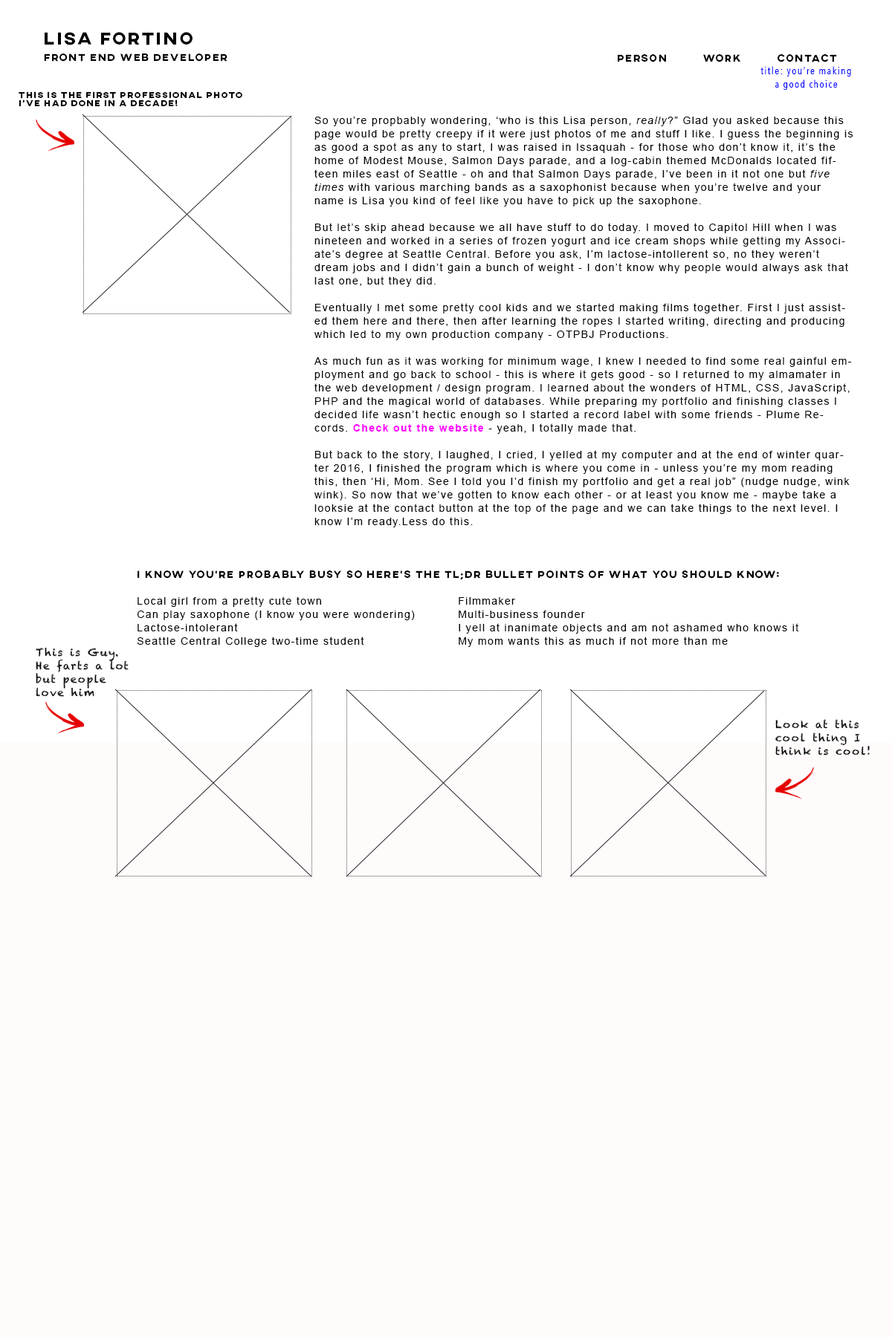
<style>
.page{position:relative;width:892px;height:1337px;background:#ffffff}
.page>*{position:absolute;margin:0}
.t1{font:10.4px/8.2px "AXIS-ExtraBold";letter-spacing:0.1em;color:#020202}
.t2{font:17.8px/8.2px "AXIS-ExtraBold";letter-spacing:0.1em;color:#020202}
.t3{font:10.4px "AXIS-ExtraBold";letter-spacing:0.1em;color:#020202}
.t4{font:10.4px/13.4px "AvenirNextCondensed-Regular";letter-spacing:0.1em;color:#0000ff}
.t5{font:8.9px/8.2px "AXIS-ExtraBold";letter-spacing:0.1em;color:#020202}
.t6{font:10.4px/13.4px "ArialMT";letter-spacing:0.1em;color:#020202}
.t7{font:10.4px/13.4px "Arial-ItalicMT";letter-spacing:0.1em;color:#020202}
.t8{font:10.4px/13.4px "Arial-BoldMT";letter-spacing:0.1em;color:#ff00ff}
.t9{font:10.4px/13.4px "AXIS-ExtraBold";letter-spacing:0.1em;color:#020202}
.t10{font:10.4px/13.4px "Chalkduster";letter-spacing:0.1em;color:#020202}
</style>
<div class="page">
<p class="t1" style="left:44px;top:32px;width:183px;height:30px"><span class="t2">LISA Fortino<br><br></span>front end web developer</p>
<p class="t3" style="left:617px;top:54px;width:220px;height:8px">person          work          contact</p>
<p class="t4" style="left:760px;top:66px;width:91px;height:24px;text-align:center">title: you’re making a good choice</p>
<p class="t5" style="left:19px;top:91px;width:223px;height:16px">this is the first professional photo i’ve had done in a decade!</p>
<p class="t6" style="left:314px;top:116px;width:539px;height:412px">So you’re propbably wondering, ‘who is this Lisa person, <span class="t7">really</span>?” Glad you asked because this page would be pretty creepy if it were just photos of me and stuff I like. I guess the beginning is as good a spot as any to start, I was raised in Issaquah - for those who don’t know it, it’s the home of Modest Mouse, Salmon Days parade, and a log-cabin themed McDonalds located fifteen miles east of Seattle - oh and that Salmon Days parade, I’ve been in it not one but <span class="t7">five times</span> with various marching bands as a saxophonist because when you’re twelve and your name is Lisa you kind of feel like you have to pick up the saxophone. <br><br>But let’s skip ahead because we all have stuff to do today. I moved to Capitol Hill when I was nineteen and worked in a series of frozen yogurt and ice cream shops while getting my Associate’s degree at Seattle Central. Before you ask, I’m lactose-intollerent so, no they weren’t dream jobs and I didn’t gain a bunch of weight - I don’t know why people would always ask that last one, but they did. <br><br>Eventually I met some pretty cool kids and we started making films together. First I just assisted them here and there, then after learning the ropes I started writing, directing and producing which led to my own production company - OTPBJ Productions. <br><br>As much fun as it was working for minimum wage, I knew I needed to find some real gainful employment and go back to school - this is where it gets good - so I returned to my almamater in the web development / design program. I learned about the wonders of HTML, CSS, JavaScript, PHP and the magical world of databases. While preparing my portfolio and finishing classes I decided life wasn’t hectic enough so I started a record label with some friends - Plume Records. <span class="t8">Check out the website </span>- yeah, I totally made that. <br><br>But back to the story, I laughed, I cried, I yelled at my computer and at the end of winter quarter 2016, I finished the program which is where you come in - unless you’re my mom reading this, then ‘Hi, Mom. See I told you I’d finish my portfolio and get a real job” (nudge nudge, wink wink). So now that we’ve gotten to know each other - or at least you know me - maybe take a looksie at the contact button at the top of the page and we can take things to the next level. I know I’m ready.Less do this.</p>
<p class="t6" style="left:137px;top:571px;width:662px;height:76px"><span class="t9">I know you’re probably busy so here’s the TL;DR bullet points of what you should know:<br><br></span>Local girl from a pretty cute town      Filmmaker<br>Can play saxophone (I know you were wondering)  Multi-business founder<br>Lactose-intolerant         I yell at inanimate objects and am not ashamed who knows it<br>Seattle Central College two-time student    My mom wants this as much if not more than me</p>
<p class="t10" style="left:36px;top:647px;width:93px;height:50px">This is Guy. He farts a lot but people love him</p>
<p class="t10" style="left:775px;top:719px;width:94px;height:37px">Look at this cool thing I think is cool!</p>
</div>
